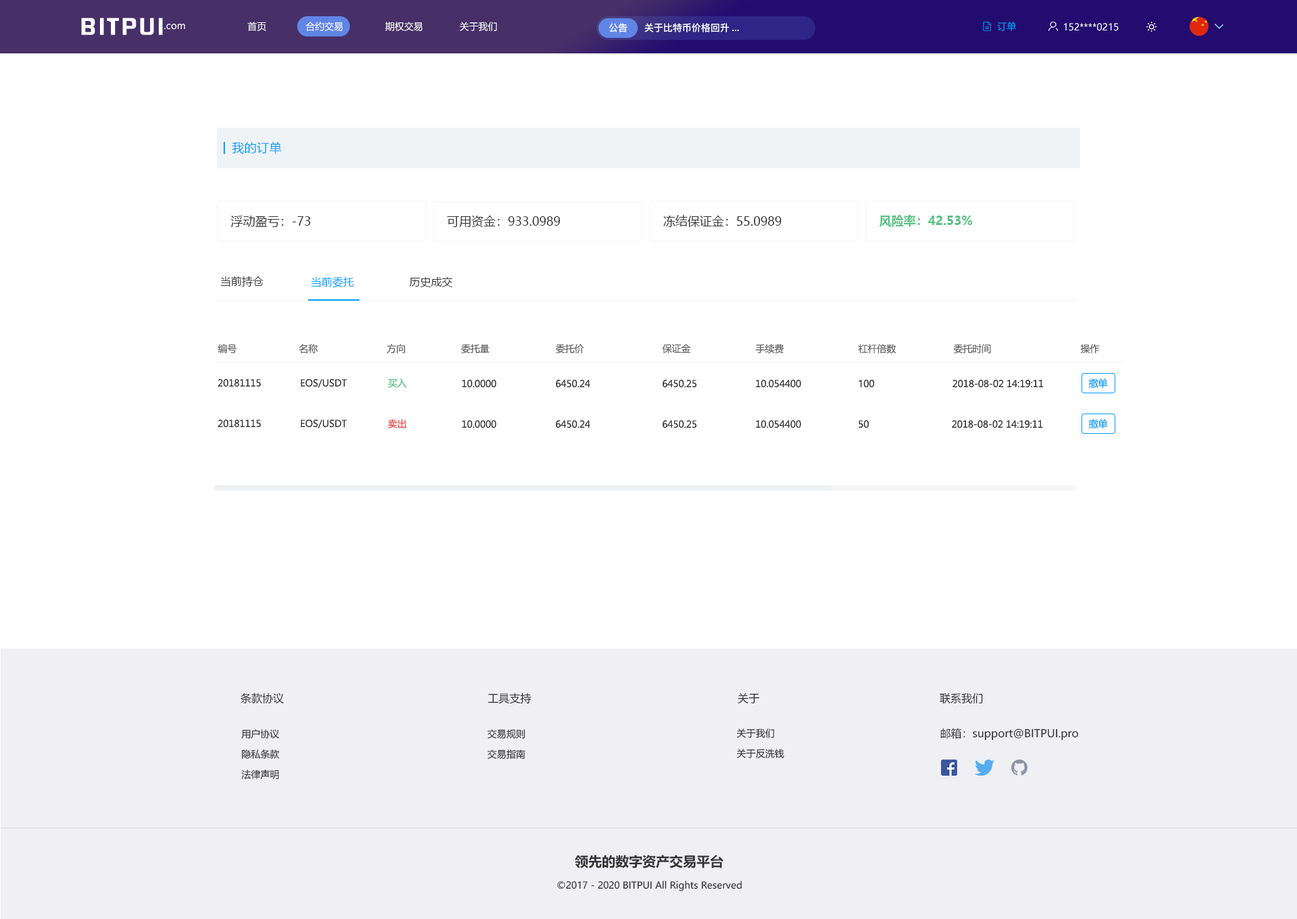
<style>
.page{position:relative;width:1297px;height:919px;background:#ffffff}
.page>*{position:absolute;margin:0}
.t1{font:20.7px "FZHZGBJW--GB1-0";letter-spacing:0.1em;color:#ffffff;scale:1.14 1}
.t2{font:9.5px "MicrosoftYaHei";color:#ffffff}
.t3{font:9.5px "PingFang-SC-Bold";color:#ffffff}
.t4{font:9.5px "MicrosoftYaHei";color:#009dfa}
.t5{font:12.2px "MicrosoftYaHei";letter-spacing:0.03em;color:#009dfa}
.t6{font:12.2px "MicrosoftYaHei";color:#333333}
.t7{font:12.2px "MicrosoftYaHei-Bold";color:#56c182}
.t8{font:10.8px "MicrosoftYaHei";color:#333333}
.t9{font:10.8px "MicrosoftYaHei";color:#009dfa}
.t10{font:9.5px "MicrosoftYaHei";letter-spacing:-0.01em;color:#666666}
.t11{font:9.5px "MicrosoftYaHei";letter-spacing:-0.01em;color:#333333}
.t12{font:9.5px "MicrosoftYaHei";letter-spacing:-0.01em;color:#56c182}
.t13{font:9.5px "MicrosoftYaHei";letter-spacing:-0.01em;color:#009dfa}
.t14{font:9.5px "MicrosoftYaHei";letter-spacing:-0.01em;color:#e74642}
.t15{font:9.5px/20.3px "MicrosoftYaHei";color:#333333}
.t16{font:13.5px "MicrosoftYaHei-Bold";color:#333333}
.t17{font:9.5px "MicrosoftYaHei";color:#333333}
</style>
<div class="page">
<p class="t1" style="left:81px;top:18px;width:82px;height:17px">BITPUI</p>
<p class="t2" style="left:164px;top:24px;width:21px;height:6px">.com</p>
<p class="t2" style="left:247px;top:22px;width:250px;height:9px">首页              合约交易               期权交易             关于我们</p>
<p class="t3" style="left:609px;top:23px;width:19px;height:9px">公告</p>
<p class="t3" style="left:645px;top:23px;width:94px;height:9px">关于比特币价格回升...</p>
<p class="t4" style="left:997px;top:22px;width:19px;height:9px">订单</p>
<p class="t2" style="left:1064px;top:23px;width:55px;height:8px">152****0215</p>
<p class="t5" style="left:232px;top:142px;width:50px;height:12px">我的订单</p>
<p class="t6" style="left:231px;top:216px;width:80px;height:11px">浮动盈亏：-73</p>
<p class="t6" style="left:447px;top:216px;width:113px;height:11px">可用资金：933.0989</p>
<p class="t6" style="left:664px;top:215px;width:118px;height:12px">冻结保证金：55.0989</p>
<p class="t7" style="left:879px;top:215px;width:94px;height:12px">风险率：42.53%</p>
<p class="t8" style="left:220px;top:276px;width:44px;height:11px">当前持仓</p>
<p class="t9" style="left:311px;top:276px;width:43px;height:12px">当前委托</p>
<p class="t8" style="left:410px;top:277px;width:43px;height:10px">历史成交</p>
<p class="t10" style="left:218px;top:344px;width:19px;height:9px">编号</p>
<p class="t10" style="left:299px;top:344px;width:19px;height:9px">名称</p>
<p class="t10" style="left:387px;top:344px;width:18px;height:9px">方向</p>
<p class="t10" style="left:461px;top:344px;width:29px;height:9px">委托量</p>
<p class="t10" style="left:555px;top:344px;width:30px;height:9px">委托价</p>
<p class="t10" style="left:662px;top:344px;width:29px;height:9px">保证金</p>
<p class="t10" style="left:756px;top:344px;width:28px;height:9px">手续费</p>
<p class="t10" style="left:858px;top:344px;width:39px;height:9px">杠杆倍数</p>
<p class="t10" style="left:954px;top:344px;width:37px;height:9px">委托时间</p>
<p class="t10" style="left:1081px;top:344px;width:19px;height:9px">操作</p>
<p class="t11" style="left:218px;top:379px;width:43px;height:8px">20181115</p>
<p class="t11" style="left:301px;top:379px;width:46px;height:9px">EOS/USDT</p>
<p class="t12" style="left:388px;top:378px;width:19px;height:10px">买入</p>
<p class="t11" style="left:462px;top:380px;width:35px;height:8px">10.0000</p>
<p class="t11" style="left:556px;top:380px;width:35px;height:8px">6450.24</p>
<p class="t11" style="left:663px;top:380px;width:34px;height:8px">6450.25</p>
<p class="t11" style="left:756px;top:380px;width:45px;height:8px">10.054400</p>
<p class="t11" style="left:859px;top:380px;width:15px;height:8px">100</p>
<p class="t11" style="left:953px;top:380px;width:91px;height:8px">2018-08-02 14:19:11</p>
<p class="t13" style="left:1089px;top:378px;width:19px;height:10px">撤单</p>
<p class="t11" style="left:218px;top:420px;width:43px;height:8px">20181115</p>
<p class="t11" style="left:301px;top:420px;width:46px;height:8px">EOS/USDT</p>
<p class="t14" style="left:388px;top:419px;width:18px;height:9px">卖出</p>
<p class="t11" style="left:462px;top:420px;width:35px;height:8px">10.0000</p>
<p class="t11" style="left:556px;top:420px;width:35px;height:8px">6450.24</p>
<p class="t11" style="left:663px;top:420px;width:34px;height:8px">6450.25</p>
<p class="t11" style="left:756px;top:420px;width:45px;height:8px">10.054400</p>
<p class="t11" style="left:859px;top:420px;width:10px;height:8px">50</p>
<p class="t11" style="left:952px;top:420px;width:91px;height:8px">2018-08-02 14:19:11</p>
<p class="t13" style="left:1089px;top:419px;width:19px;height:9px">撤单</p>
<p class="t8" style="left:241px;top:693px;width:43px;height:10px">条款协议</p>
<p class="t8" style="left:488px;top:693px;width:43px;height:11px">工具支持</p>
<p class="t8" style="left:738px;top:693px;width:22px;height:10px">关于</p>
<p class="t8" style="left:940px;top:693px;width:43px;height:11px">联系我们</p>
<p class="t15" style="left:241px;top:729px;width:39px;height:50px;text-align:center">用户协议<br>隐私条款<br>法律声明</p>
<p class="t15" style="left:487px;top:729px;width:39px;height:30px">交易规则<br>交易指南</p>
<p class="t15" style="left:737px;top:728px;width:48px;height:30px">关于我们<br>关于反洗钱</p>
<p class="t8" style="left:941px;top:728px;width:138px;height:13px">邮箱：support@BITPUI.pro</p>
<p class="t16" style="left:575px;top:855px;width:149px;height:13px">领先的数字资产交易平台</p>
<p class="t17" style="left:558px;top:881px;width:184px;height:10px">©2017 - 2020 BITPUI All Rights Reserved</p>
</div>
